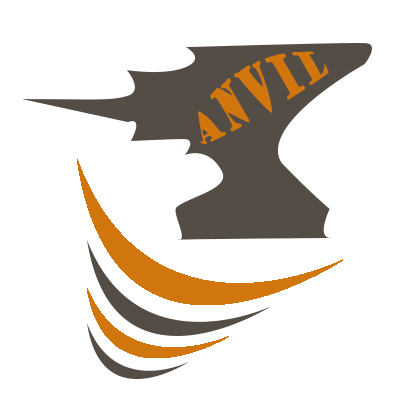
<style>
.page{position:relative;width:400px;height:400px;background:#ffffff}
.page>*{position:absolute;margin:0}
.t1{font:25.4px "GoudyStout";color:#d1760c}
</style>
<div class="page">
<p class="t1" style="left:198px;top:51px;width:131px;height:94px;rotate:-30deg">Anvil</p>
</div>
